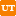
<style>
.page{position:relative;width:16px;height:16px;background:#f77f00}
.page>*{position:absolute;margin:0}
.t1{font:9px "Georgia-Bold";color:#ffffff}
</style>
<div class="page">
<p class="t1" style="left:1px;top:5px;width:14px;height:6px">UT</p>
</div>
